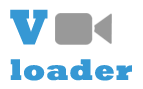
<style>
.page{position:relative;width:143px;height:89px;background:#ffffff}
.page>*{position:absolute;margin:0}
.t1{font:29.9px "Rockwell-ExtraBold";color:#3698d4;font-weight:bold}
.t2{font:50px "Rockwell-ExtraBold";color:#3698d4;font-weight:bold}
</style>
<div class="page">
<p class="t1" style="left:10px;top:9px;width:122px;height:72px"><span class="t2">V<br></span>loader</p>
</div>
